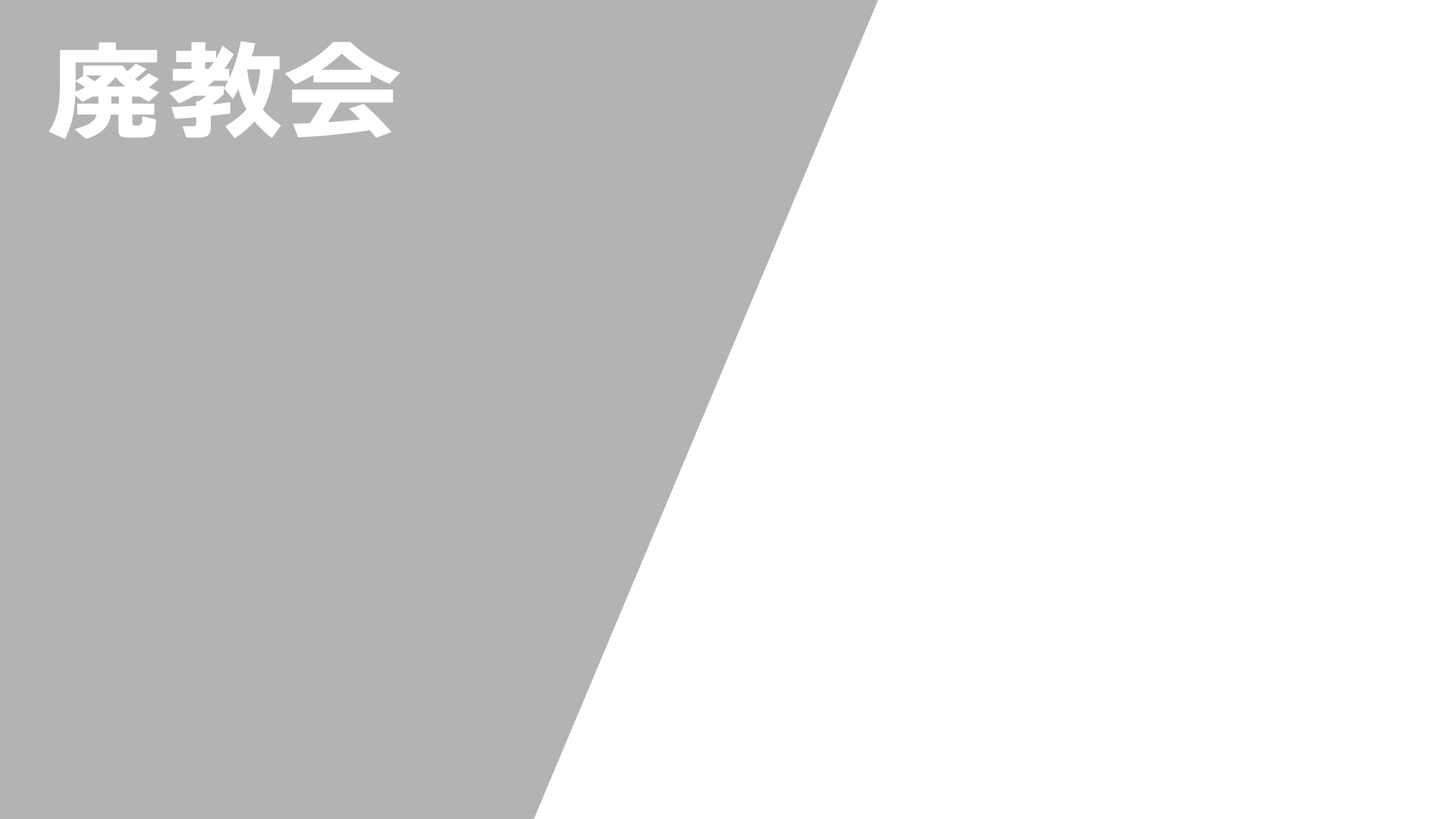
<style>
.page{position:relative;width:1456px;height:819px;background:#ffffff}
.page>*{position:absolute;margin:0}
.t1{font:107px "NitalagoRuika-06";color:#ffffff;scale:1.1 1}
</style>
<div class="page">
<p class="t1" style="left:49px;top:41px;width:351px;height:99px">廃教会</p>
</div>
